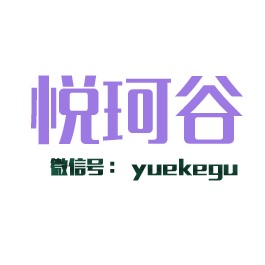
<style>
.page{position:relative;width:265px;height:265px;background:#ffffff}
.page>*{position:absolute;margin:0}
.t1{font:72px "MFLangQian_Noncommercial-Regular";color:#9d7ae3}
.t2{font:17.9px "MFLiHei_Noncommercial-Regular";color:#103c2e;font-weight:bold}
</style>
<div class="page">
<p class="t1" style="left:31px;top:75px;width:212px;height:70px">悦珂谷</p>
<p class="t2" style="left:50px;top:158px;width:188px;height:23px">微信号：yuekegu</p>
</div>
